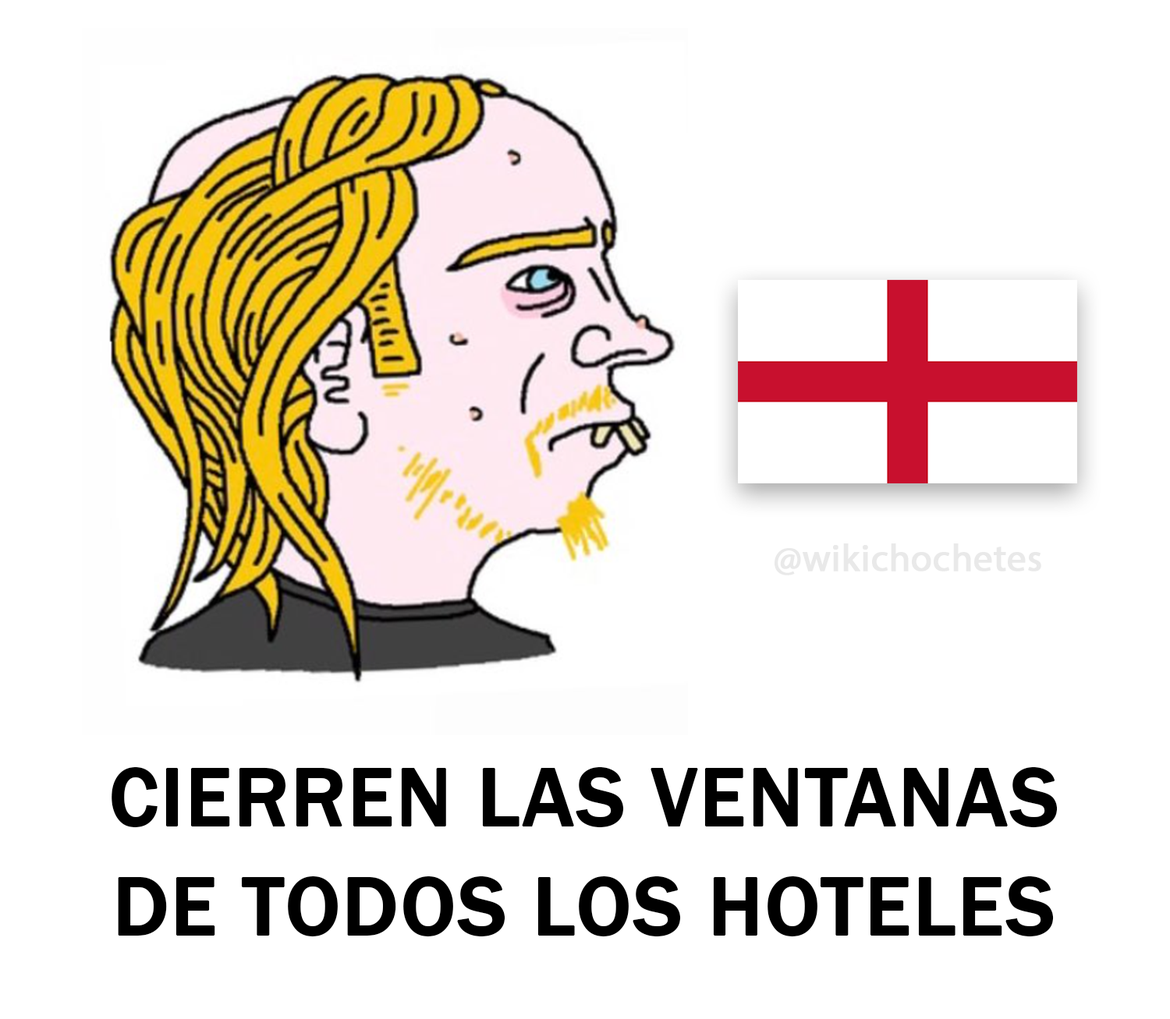
<style>
.page{position:relative;width:1170px;height:1019px;background:#ffffff}
.page>*{position:absolute;margin:0}
.t1{font:38.1px "MyriadPro-Regular";color:#e9e9e9;font-weight:bold}
.t2{font:85.4px "FranklinGothic-Medium";color:#000000;font-weight:bold}
</style>
<div class="page">
<p class="t1" style="left:774px;top:544px;width:267px;height:32px">@wikichochetes</p>
<p class="t2" style="left:112px;top:767px;width:946px;height:170px;text-align:center">CIERREN LAS VENTANAS<br>DE TODOS LOS HOTELES</p>
</div>
